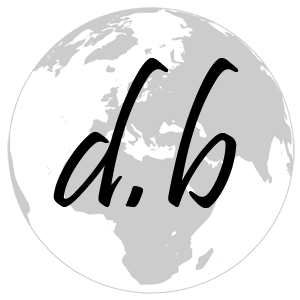
<style>
.page{position:relative;width:300px;height:300px;background:#ffffff}
.page>*{position:absolute;margin:0}
.t1{font:180px "Pristina-Regular";color:#000000}
</style>
<div class="page">
<p class="t1" style="left:53px;top:57px;width:186px;height:151px">d.b</p>
</div>
